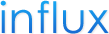
<style>
.page{position:relative;width:109px;height:34px;background:#ffffff}
.page>*{position:absolute;margin:0}
.t1{font:43px "CenturyGothic";letter-spacing:0.025em;color:#1783df}
</style>
<div class="page">
<p class="t1" style="left:0px;top:0px;width:109px;height:34px">influx</p>
</div>
